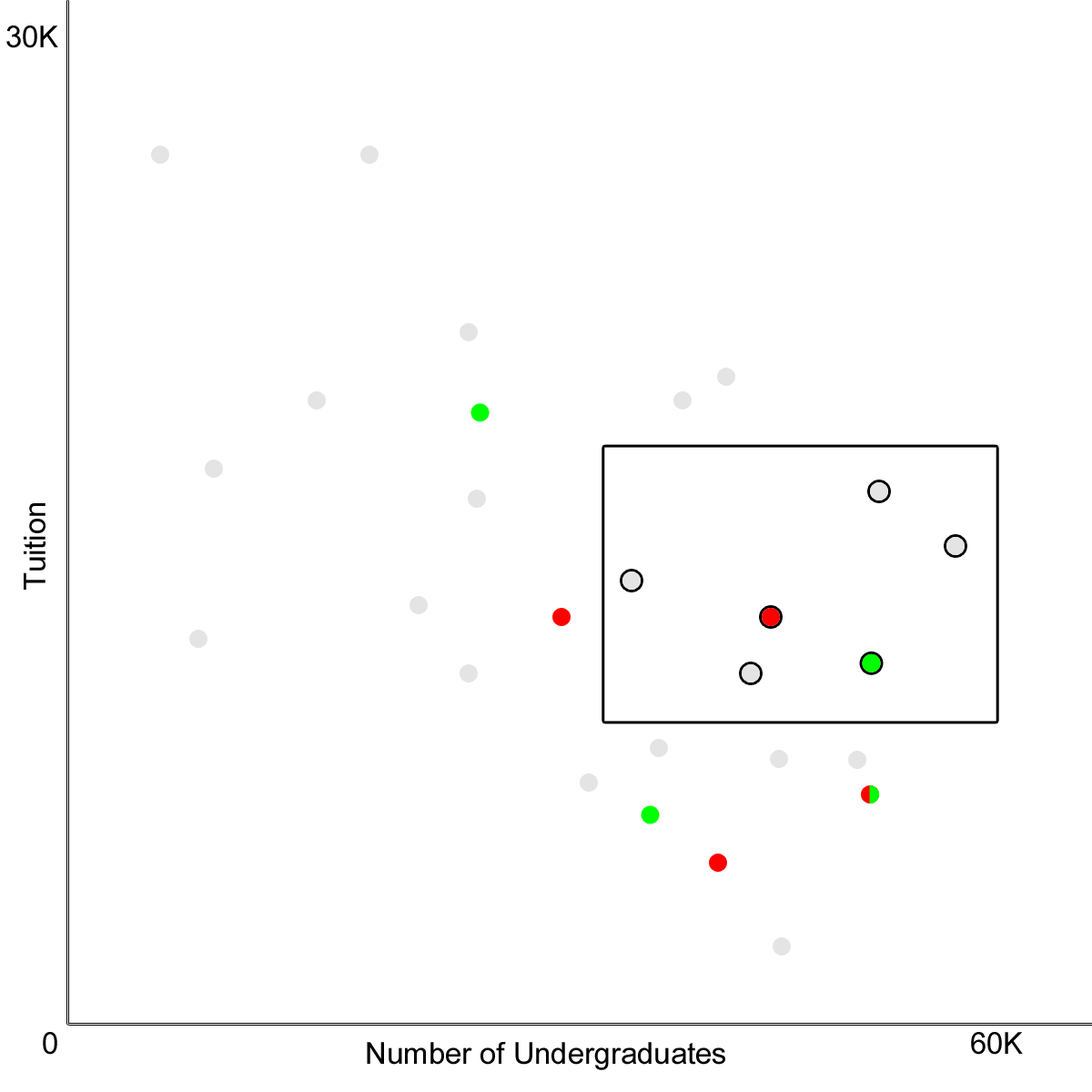
<style>
.page{position:relative;width:1092px;height:1092px;background:#ffffff}
.page>*{position:absolute;margin:0}
.t1{font:30.3px "ArialNarrow";color:#000000;scale:1.2 1}
</style>
<div class="page">
<p class="t1" style="left:6px;top:25px;width:52px;height:23px">30K</p>
<p class="t1" style="left:24px;top:503px;width:21px;height:87px;rotate:-90deg">Tuition</p>
<p class="t1" style="left:43px;top:1032px;width:14px;height:23px">0</p>
<p class="t1" style="left:971px;top:1032px;width:52px;height:23px">60K</p>
<p class="t1" style="left:367px;top:1042px;width:358px;height:28px">Number of Undergraduates</p>
</div>
